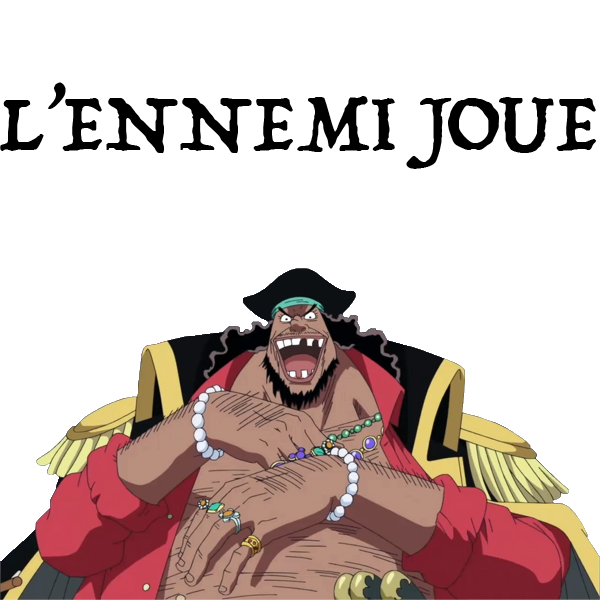
<style>
.page{position:relative;width:600px;height:600px;background:#ffffff}
.page>*{position:absolute;margin:0}
.t1{font:90px "Trattatello";color:#000000}
</style>
<div class="page">
<p class="t1" style="left:0px;top:82px;width:596px;height:87px">L’ENNEMI JOUE</p>
</div>
